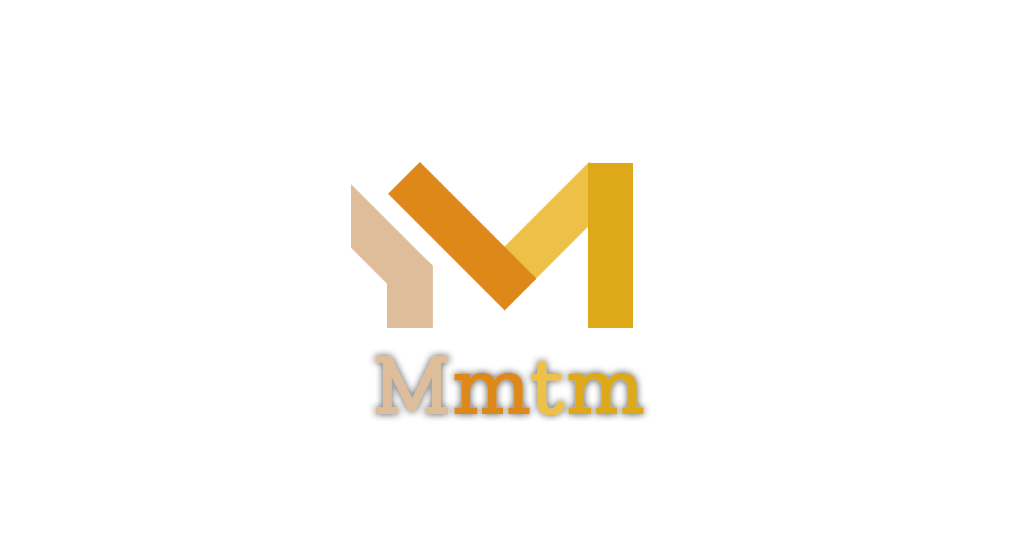
<style>
.page{position:relative;width:1024px;height:559px;background:#ffffff}
.page>*{position:absolute;margin:0}
.t1{font:88px "ZillaSlab-Regular";color:#debd9a;font-weight:bold}
.t2{font:88px "ZillaSlab-Regular";color:#dd8819;font-weight:bold}
.t3{font:88px "ZillaSlab-Regular";color:#edc148;font-weight:bold}
.t4{font:88px "ZillaSlab-Regular";color:#dda919;font-weight:bold}
</style>
<div class="page">
<p class="t1" style="left:375px;top:356px;width:269px;height:59px">M<span class="t2">m</span><span class="t3">t</span><span class="t4">m</span></p>
</div>
